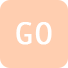
<style>
.page{position:relative;width:68px;height:68px;background:#ffceb0}
.page>*{position:absolute;margin:0}
.t1{font:31px "AndaleMono";color:#ffffff;font-weight:bold}
</style>
<div class="page">
<p class="t1" style="left:16px;top:22px;width:36px;height:23px">GO</p>
</div>
